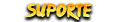
<style>
.page{position:relative;width:116px;height:22px;background:#ffffff}
.page>*{position:absolute;margin:0}
.t1{font:15px "Ninja-Naruto"}
</style>
<div class="page">
<p class="t1" style="left:25px;top:3px;width:67px;height:17px">SUPORTE</p>
</div>
